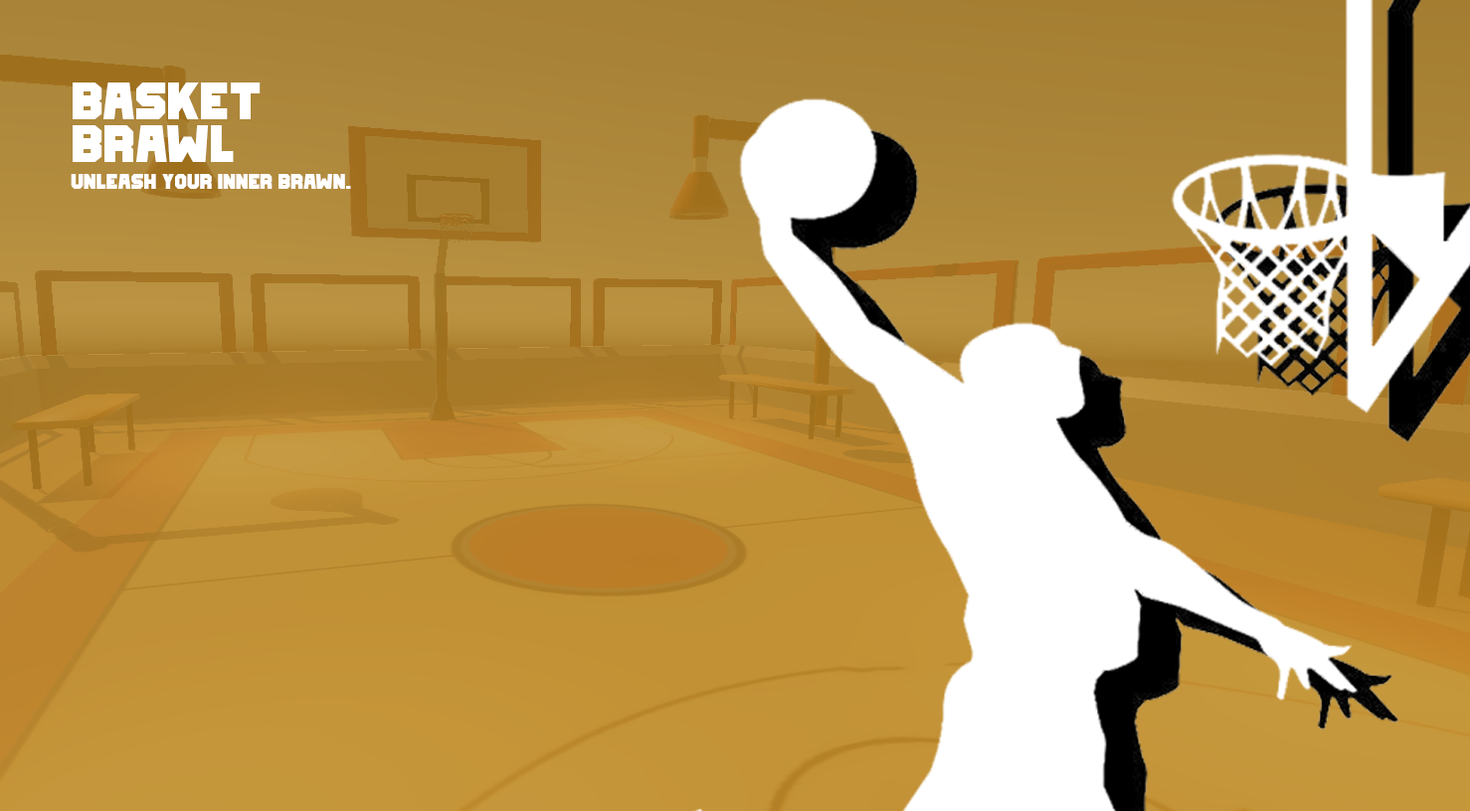
<style>
.page{position:relative;width:1470px;height:811px}
.page>*{position:absolute;margin:0}
.t1{font:53px "Inlanders-Bold";color:#ffffff}
.t2{font:21.2px "Inlanders-Bold";color:#ffffff}
</style>
<div class="page">
<p class="t1" style="left:73px;top:83px;width:188px;height:36px">basket</p>
<p class="t1" style="left:73px;top:125px;width:161px;height:37px">Brawl</p>
<p class="t2" style="left:71px;top:174px;width:280px;height:15px">Unleash Your Inner Brawn.</p>
</div>
